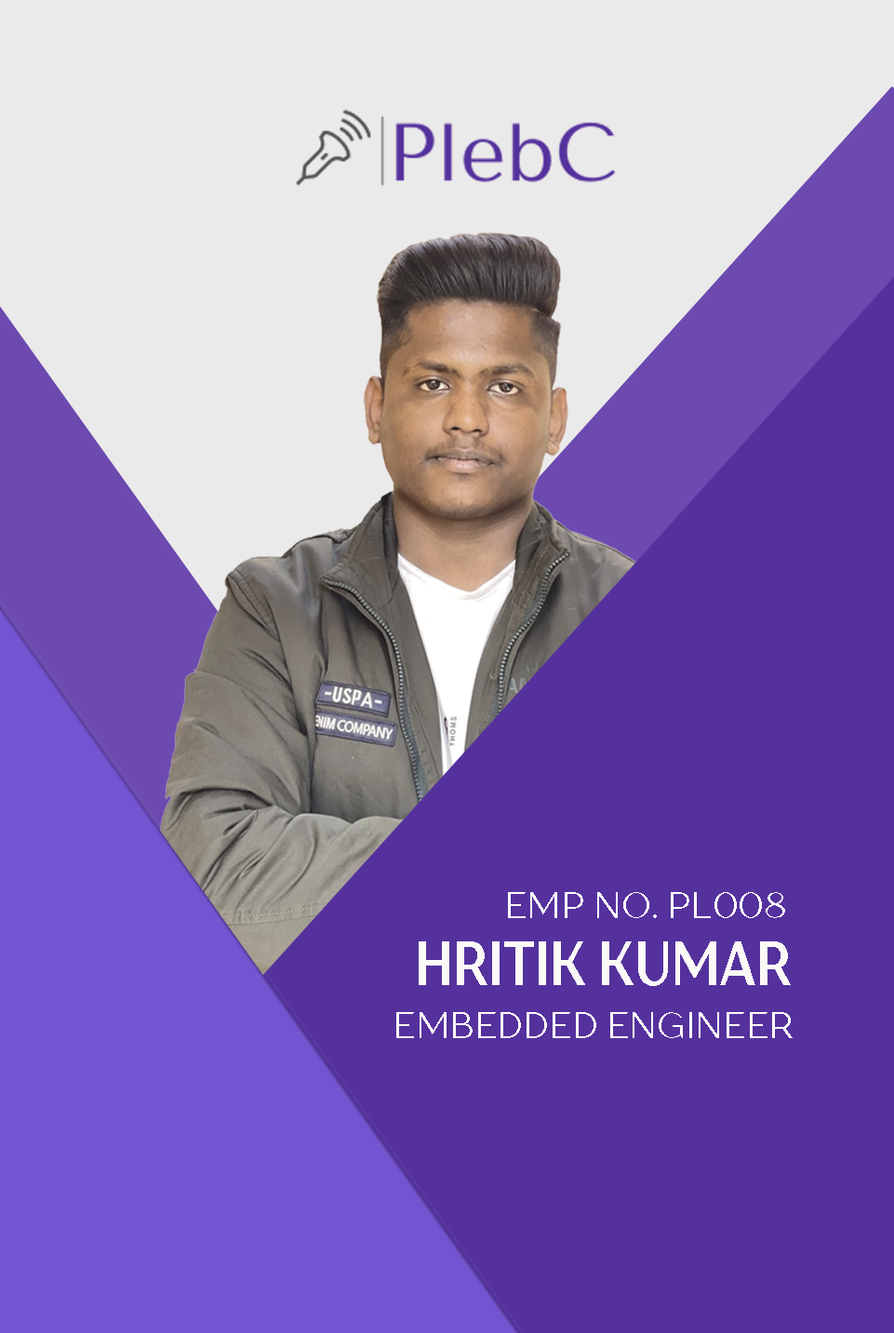
<style>
.page{position:relative;width:894px;height:1333px;background:#55319d}
.page>*{position:absolute;margin:0}
.t1{font:36.2px "TTDrugsTrial-Regular";color:#fffefd}
.t2{font:62px "TTDrugsTrial-Bold";color:#fbfaf7;scale:0.82 1}
.t3{font:36.2px "TTDrugsTrial-Regular";color:#fdfbf8}
</style>
<div class="page">
<p class="t1" style="left:508px;top:892px;width:277px;height:26px">EMP NO. PL008</p>
<p class="t2" style="left:419px;top:942px;width:372px;height:44px">HRITIK KUMAR</p>
<p class="t3" style="left:396px;top:1012px;width:397px;height:26px">EMBEDDED ENGINEER</p>
</div>
